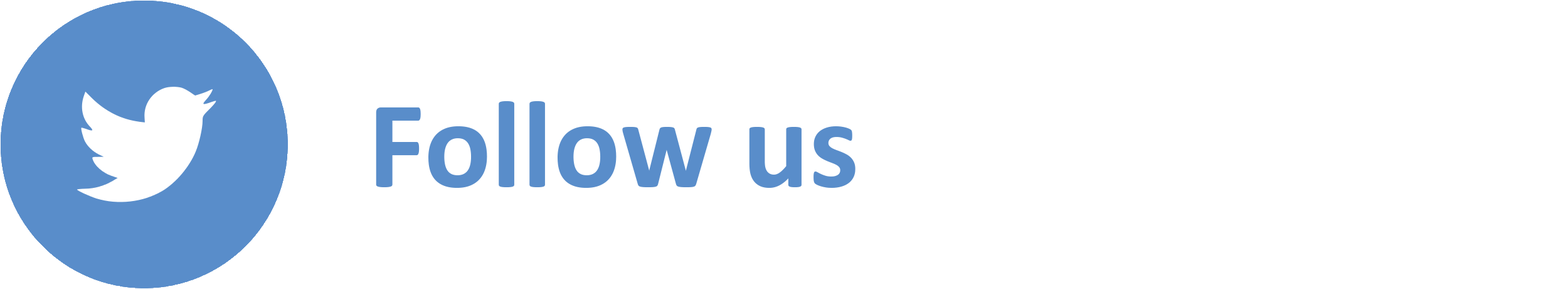
<style>
.page{position:relative;width:1568px;height:289px;background:#ffffff}
.page>*{position:absolute;margin:0}
.t1{font:125.4px "Calibri-Bold";color:#598dca}
</style>
<div class="page">
<p class="t1" style="left:376px;top:101px;width:480px;height:87px">Follow us</p>
</div>
